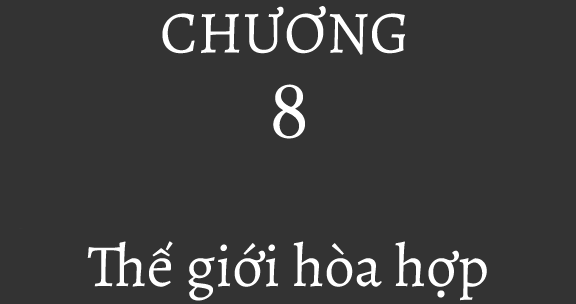
<style>
.page{position:relative;width:576px;height:304px;background:#333333}
.page>*{position:absolute;margin:0}
.t1{font:60px "Alegreya-Regular";color:#ffffff}
</style>
<div class="page">
<p class="t1" style="left:162px;top:6px;width:243px;height:49px">CHƯƠNG</p>
<p class="t1" style="left:87px;top:241px;width:400px;height:60px">Thế giới hòa hợp</p>
</div>
